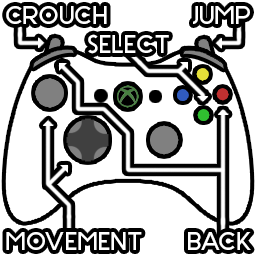
<style>
.page{position:relative;width:256px;height:256px;background:#ffffff}
.page>*{position:absolute;margin:0}
.t1{font:24px "Stark";color:#ffffff}
</style>
<div class="page">
<p class="t1" style="left:6px;top:6px;width:101px;height:18px">CROUCH</p>
<p class="t1" style="left:193px;top:6px;width:57px;height:18px">JUMP</p>
<p class="t1" style="left:88px;top:34px;width:81px;height:20px">SELECT</p>
<p class="t1" style="left:6px;top:232px;width:136px;height:18px">MOVEMENT</p>
<p class="t1" style="left:188px;top:232px;width:63px;height:18px">BACK</p>
</div>
